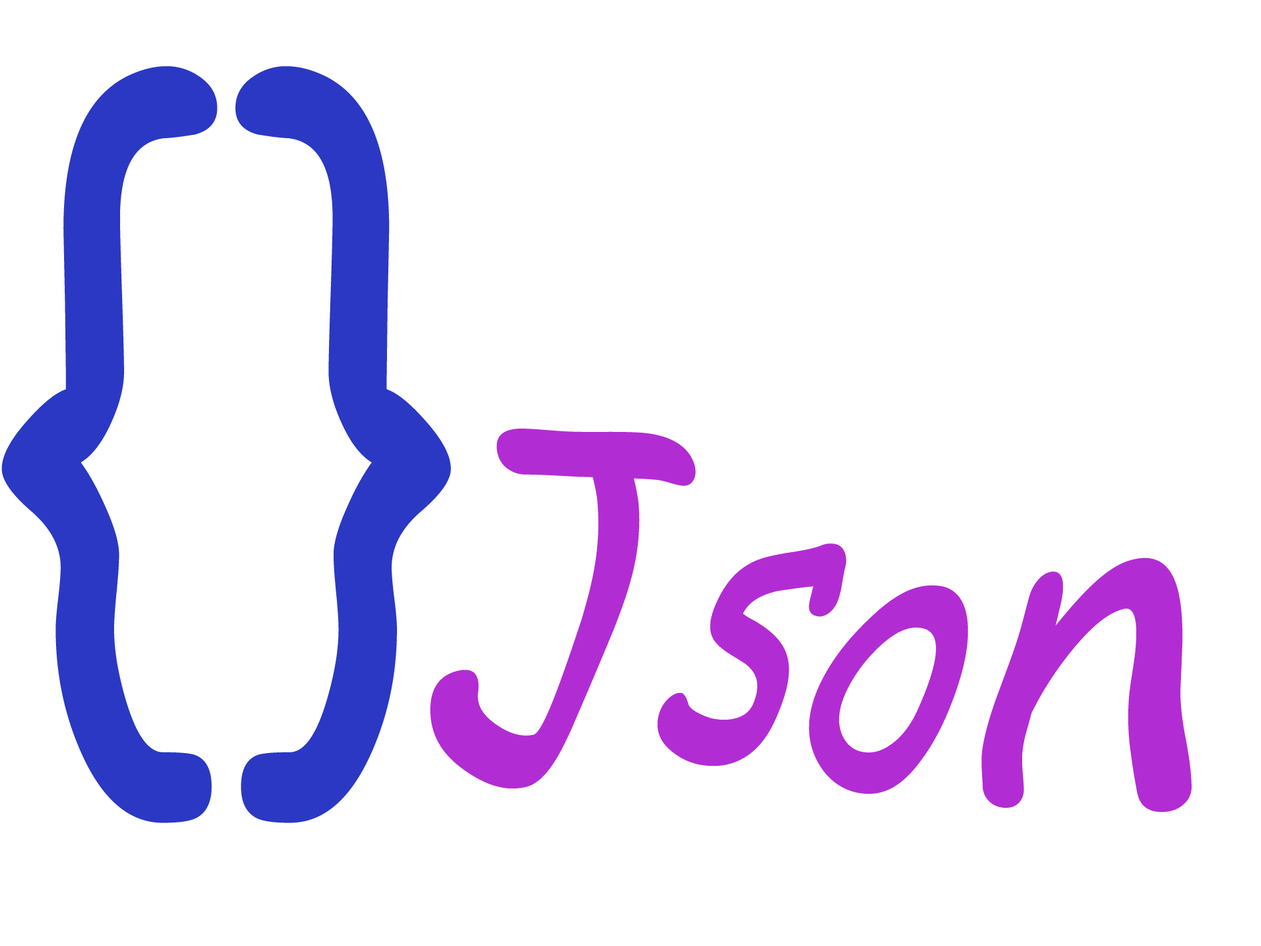
<style>
.page{position:relative;width:1261px;height:946px;background:#ffffff}
.page>*{position:absolute;margin:0}
.t1{font:770.8px "ComicSansMS";color:#2a38c4;scale:0.83 1}
.t2{font:493.2px "ComicSansMS";color:#b22cd3;scale:0.74 1}
</style>
<div class="page">
<p class="t1" style="left:1px;top:66px;width:450px;height:757px">{}</p>
<p class="t2" style="left:430px;top:428px;width:762px;height:384px">Json</p>
</div>
